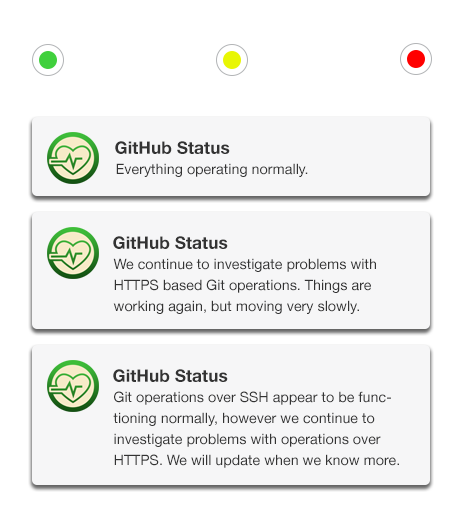
<style>
.page{position:relative;width:465px;height:531px;background:#f6f6f7}
.page>*{position:absolute;margin:0}
.t1{font:17.3px "HelveticaNeue-Bold";color:#333333}
.t2{font:14.3px "HelveticaNeue";color:#333333}
.t3{font:14.3px/21px "HelveticaNeue";color:#333333}
</style>
<div class="page">
<p class="t1" style="left:115px;top:141px;width:115px;height:13px">GitHub Status</p>
<p class="t2" style="left:116px;top:163px;width:192px;height:14px">Everything operating normally.</p>
<p class="t1" style="left:113px;top:236px;width:115px;height:13px">GitHub Status</p>
<p class="t3" style="left:113px;top:258px;width:263px;height:56px">We continue to investigate problems with HTTPS based Git operations. Things are working again, but moving very slowly.</p>
<p class="t1" style="left:113px;top:369px;width:115px;height:13px">GitHub Status</p>
<p class="t3" style="left:113px;top:391px;width:286px;height:77px">Git operations over SSH appear to be functioning normally, however we continue to investigate problems with operations over HTTPS. We will update when we know more.</p>
</div>
